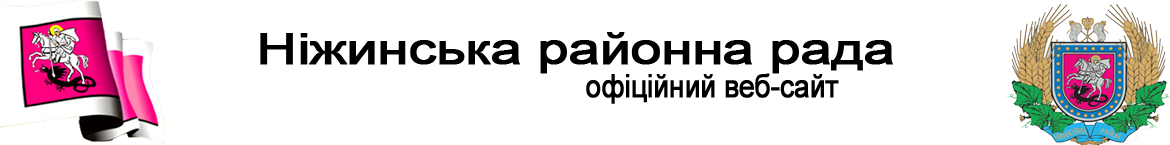
<style>
.page{position:relative;width:1170px;height:145px;background:#ffffff}
.page>*{position:absolute;margin:0}
.t1{font:42.7px "ArialMT";letter-spacing:-0.025em;color:#000000;font-weight:bold;scale:1.3 1}
.t2{font:32px "ArialMT";letter-spacing:-0.025em;color:#000000;font-weight:bold;scale:0.88 1}
</style>
<div class="page">
<p class="t1" style="left:260px;top:32px;width:633px;height:42px">Ніжинська районна рада</p>
<p class="t2" style="left:586px;top:73px;width:253px;height:31px">офіційний веб-сайт</p>
</div>
